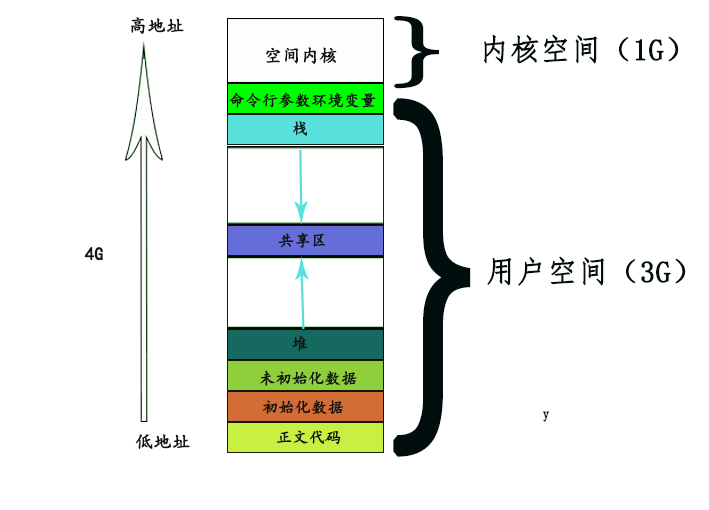
<style>
.page{position:relative;width:709px;height:510px;background:#ffffff}
.page>*{position:absolute;margin:0}
.t1{font:18px "KaiTi";color:#141414;font-weight:bold}
.t2{font:79.1px "FangSong";color:#010e0e;font-weight:bold;scale:2.33 1}
.t3{font:30px "FangSong";color:#010e0e;font-weight:bold}
.t4{font:16px "KaiTi";color:#141414;font-weight:bold}
.t5{font:393.8px "FangSong";color:#010e0e;font-weight:bold;scale:0.81 1}
.t6{font:16px "FangSong";color:#010e0e;font-weight:bold;scale:0.81 1}
</style>
<div class="page">
<p class="t1" style="left:131px;top:17px;width:53px;height:17px">高地址</p>
<p class="t2" style="left:394px;top:16px;width:45px;height:73px">}</p>
<p class="t3" style="left:484px;top:34px;width:195px;height:30px">内核空间（1G）</p>
<p class="t1" style="left:266px;top:47px;width:71px;height:17px">空间内核</p>
<p class="t4" style="left:229px;top:92px;width:147px;height:16px">命令行参数环境变量</p>
<p class="t5" style="left:393px;top:98px;width:156px;height:359px">}<span class="t6">y</span></p>
<p class="t4" style="left:293px;top:121px;width:14px;height:15px">栈</p>
<p class="t4" style="left:278px;top:232px;width:48px;height:16px">共享区</p>
<p class="t1" style="left:84px;top:247px;width:19px;height:14px">4G</p>
<p class="t3" style="left:487px;top:256px;width:199px;height:30px">用户空间（3G）</p>
<p class="t4" style="left:292px;top:335px;width:16px;height:16px">堆</p>
<p class="t4" style="left:260px;top:370px;width:97px;height:16px">未初始化数据</p>
<p class="t4" style="left:262px;top:400px;width:82px;height:14px">初始化数据</p>
<p class="t1" style="left:135px;top:434px;width:55px;height:16px">低地址</p>
<p class="t4" style="left:276px;top:430px;width:65px;height:15px">正文代码</p>
</div>
